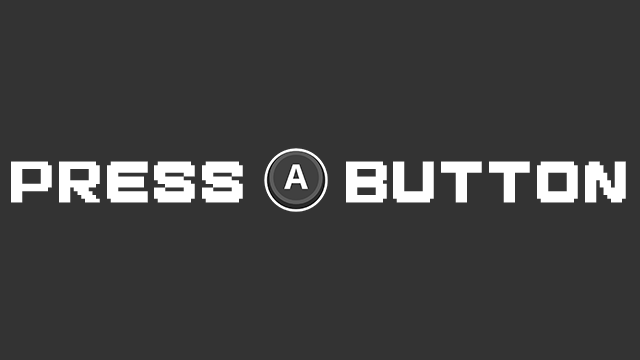
<style>
.page{position:relative;width:640px;height:360px;background:#333333}
.page>*{position:absolute;margin:0}
.t1{font:44.5px "Melonano";letter-spacing:0.075em;color:#ffffff}
</style>
<div class="page">
<p class="t1" style="left:11px;top:161px;width:615px;height:42px">PRESS  BUTTON</p>
</div>
